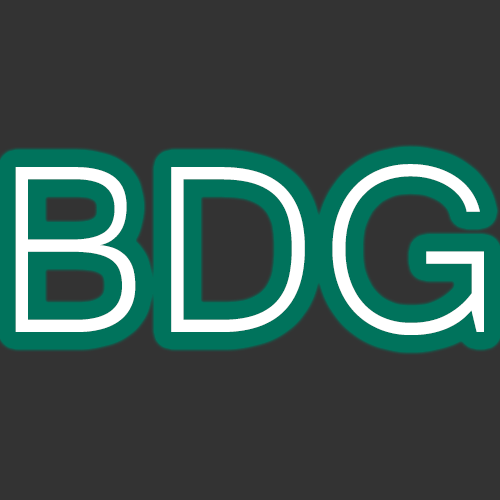
<style>
.page{position:relative;width:500px;height:500px;background:#333333}
.page>*{position:absolute;margin:0}
.t1{font:308.1px "Microsoft-Yi-Baiti";color:#ffffff}
</style>
<div class="page">
<p class="t1" style="left:15px;top:164px;width:469px;height:171px">BDG</p>
</div>
